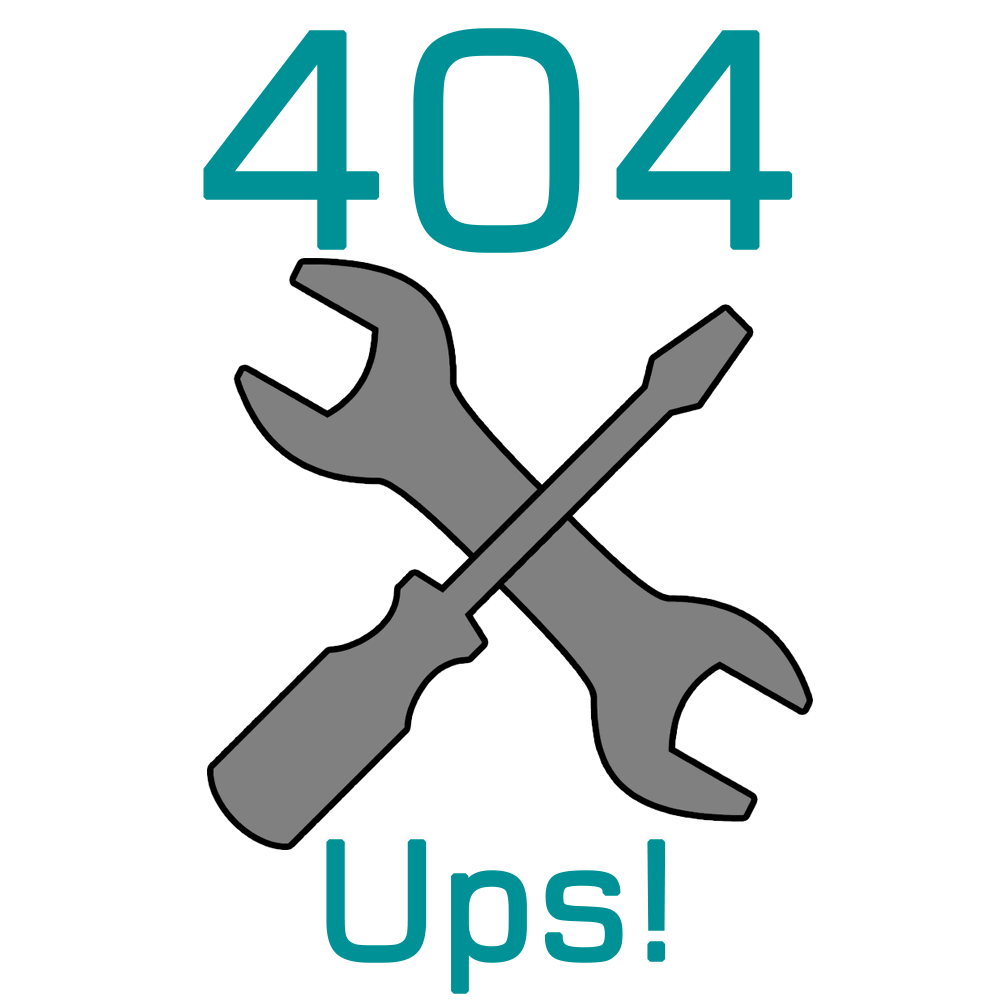
<style>
.page{position:relative;width:1000px;height:1000px;background:#ffffff}
.page>*{position:absolute;margin:0}
.t1{font:293.8px "Square721BT-Roman";color:#009196;font-weight:bold}
.t2{font:161px "Square721BT-Roman";color:#009196;font-weight:bold}
</style>
<div class="page">
<p class="t1" style="left:203px;top:28px;width:590px;height:225px">404</p>
<p class="t2" style="left:326px;top:839px;width:340px;height:155px">Ups!</p>
</div>
